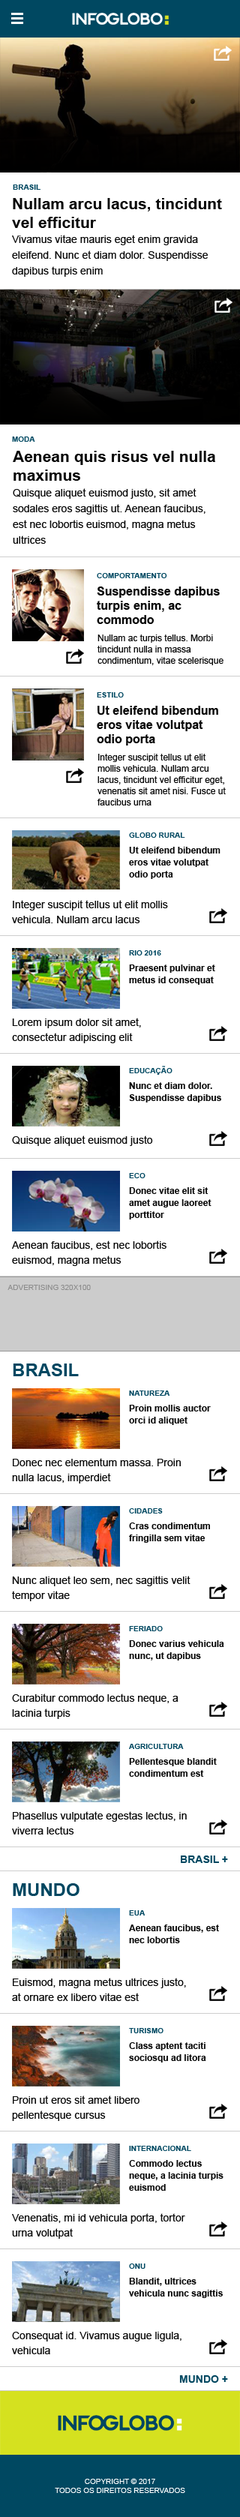
<style>
.page{position:relative;width:240px;height:2517px;background:#ffffff}
.page>*{position:absolute;margin:0}
.t1{font:7.5px "Arial-BoldMT";color:#004861}
.t2{font:15.8px "Arial-BoldMT";color:#090909}
.t3{font:10.5px/15.8px "ArialMT";color:#090909}
.t4{font:12px/14.2px "Arial-BoldMT";color:#090909}
.t5{font:9px/11.2px "ArialMT";color:#090909}
.t6{font:9px/12px "Arial-BoldMT";color:#090909}
.t7{font:10.5px/15px "ArialMT";color:#090909}
.t8{font:10.5px "ArialMT";color:#090909}
.t9{font:7.5px "ArialMT";color:#8e8e8e}
.t10{font:18px "Arial-BoldMT";color:#004761}
.t11{font:10.5px "Arial-BoldMT";color:#004861}
.t12{font:7.5px "ArialMT";color:#ffffff}
</style>
<div class="page">
<p class="t1" style="left:13px;top:184px;width:27px;height:6px">BRASIL</p>
<p class="t2" style="left:12px;top:198px;width:210px;height:30px">Nullam arcu lacus, tincidunt<br>vel efficitur</p>
<p class="t3" style="left:12px;top:235px;width:196px;height:42px">Vivamus vitae mauris eget enim gravida eleifend. Nunc et diam dolor. Suspendisse dapibus turpis enim</p>
<p class="t1" style="left:12px;top:436px;width:23px;height:6px">MODA</p>
<p class="t2" style="left:13px;top:451px;width:202px;height:30px">Aenean quis risus vel nulla<br>maximus</p>
<p class="t3" style="left:13px;top:488px;width:193px;height:56px">Quisque aliquet euismod justo, sit amet<br>sodales eros sagittis ut. Aenean faucibus,<br>est nec lobortis euismod, magna metus ultrices</p>
<p class="t1" style="left:97px;top:573px;width:70px;height:5px">COMPORTAMENTO</p>
<p class="t4" style="left:97px;top:586px;width:123px;height:38px">Suspendisse dapibus turpis enim, ac commodo</p>
<p class="t5" style="left:98px;top:634px;width:126px;height:31px">Nullam ac turpis tellus. Morbi tincidunt nulla in massa condimentum, vitae scelerisque</p>
<p class="t1" style="left:97px;top:692px;width:27px;height:6px">ESTILO</p>
<p class="t4" style="left:97px;top:706px;width:121px;height:40px">Ut eleifend bibendum eros vitae volutpat odio porta</p>
<p class="t5" style="left:98px;top:754px;width:128px;height:52px">Integer suscipit tellus ut elit mollis vehicula. Nullam arcu lacus, tincidunt vel efficitur eget, venenatis sit amet nisi. Fusce ut faucibus urna</p>
<p class="t1" style="left:129px;top:832px;width:56px;height:6px">GLOBO RURAL</p>
<p class="t6" style="left:129px;top:847px;width:91px;height:32px">Ut eleifend bibendum eros vitae volutpat odio porta</p>
<p class="t7" style="left:12px;top:900px;width:156px;height:23px">Integer suscipit tellus ut elit mollis vehicula. Nullam arcu lacus</p>
<p class="t1" style="left:129px;top:950px;width:32px;height:6px">RIO 2016</p>
<p class="t6" style="left:129px;top:964px;width:86px;height:21px">Praesent pulvinar et metus id consequat</p>
<p class="t7" style="left:12px;top:1018px;width:129px;height:25px">Lorem ipsum dolor sit amet, consectetur adipiscing elit</p>
<p class="t1" style="left:129px;top:1066px;width:43px;height:9px">EDUCAÇÃO</p>
<p class="t6" style="left:129px;top:1082px;width:92px;height:20px">Nunc et diam dolor. Suspendisse dapibus</p>
<p class="t8" style="left:12px;top:1136px;width:141px;height:10px">Quisque aliquet euismod justo</p>
<p class="t1" style="left:129px;top:1173px;width:17px;height:5px">ECO</p>
<p class="t6" style="left:129px;top:1187px;width:83px;height:33px">Donec vitae elit sit amet augue laoreet porttitor</p>
<p class="t7" style="left:12px;top:1240px;width:154px;height:26px">Aenean faucibus, est nec lobortis euismod, magna metus</p>
<p class="t9" style="left:8px;top:1285px;width:83px;height:5px">ADVERTISING 320X100</p>
<p class="t10" style="left:13px;top:1364px;width:66px;height:12px">BRASIL</p>
<p class="t1" style="left:129px;top:1390px;width:41px;height:6px">NATUREZA</p>
<p class="t6" style="left:129px;top:1405px;width:82px;height:20px">Proin mollis auctor orci id aliquet</p>
<p class="t7" style="left:12px;top:1458px;width:169px;height:26px">Donec nec elementum massa. Proin nulla lacus, imperdiet</p>
<p class="t1" style="left:129px;top:1508px;width:34px;height:6px">CIDADES</p>
<p class="t6" style="left:129px;top:1522px;width:81px;height:21px">Cras condimentum fringilla sem vitae</p>
<p class="t7" style="left:12px;top:1576px;width:178px;height:25px">Nunc aliquet leo sem, nec sagittis velit tempor vitae</p>
<p class="t1" style="left:129px;top:1626px;width:34px;height:5px">FERIADO</p>
<p class="t6" style="left:129px;top:1640px;width:95px;height:20px">Donec varius vehicula nunc, ut dapibus</p>
<p class="t7" style="left:12px;top:1694px;width:166px;height:25px">Curabitur commodo lectus neque, a lacinia turpis</p>
<p class="t1" style="left:129px;top:1744px;width:55px;height:5px">AGRICULTURA</p>
<p class="t6" style="left:129px;top:1758px;width:88px;height:19px">Pellentesque blandit condimentum est</p>
<p class="t7" style="left:12px;top:1811px;width:175px;height:23px">Phasellus vulputate egestas lectus, in viverra lectus</p>
<p class="t11" style="left:181px;top:1856px;width:47px;height:7px">BRASIL +</p>
<p class="t10" style="left:13px;top:1883px;width:67px;height:13px">MUNDO</p>
<p class="t1" style="left:129px;top:1910px;width:16px;height:6px">EUA</p>
<p class="t6" style="left:129px;top:1924px;width:90px;height:19px">Aenean faucibus, est nec lobortis</p>
<p class="t7" style="left:12px;top:1978px;width:174px;height:23px">Euismod, magna metus ultrices justo, at ornare ex libero vitae est</p>
<p class="t1" style="left:129px;top:2028px;width:35px;height:5px">TURISMO</p>
<p class="t6" style="left:129px;top:2042px;width:77px;height:20px">Class aptent taciti sociosqu ad litora</p>
<p class="t7" style="left:12px;top:2096px;width:128px;height:25px">Proin ut eros sit amet libero pellentesque cursus</p>
<p class="t1" style="left:129px;top:2146px;width:62px;height:5px">INTERNACIONAL</p>
<p class="t6" style="left:129px;top:2160px;width:95px;height:31px">Commodo lectus neque, a lacinia turpis euismod</p>
<p class="t7" style="left:12px;top:2213px;width:173px;height:26px">Venenatis, mi id vehicula porta, tortor urna volutpat</p>
<p class="t1" style="left:129px;top:2264px;width:17px;height:5px">ONU</p>
<p class="t6" style="left:129px;top:2278px;width:94px;height:20px">Blandit, ultrices vehicula nunc sagittis</p>
<p class="t7" style="left:12px;top:2331px;width:170px;height:23px">Consequat id. Vivamus augue ligula, vehicula</p>
<p class="t11" style="left:179px;top:2375px;width:49px;height:8px">MUNDO +</p>
<p class="t12" style="left:55px;top:2478px;width:130px;height:15px;text-align:center">COPYRIGHT © 2017<br>TODOS OS DIREITOS RESERVADOS</p>
</div>
